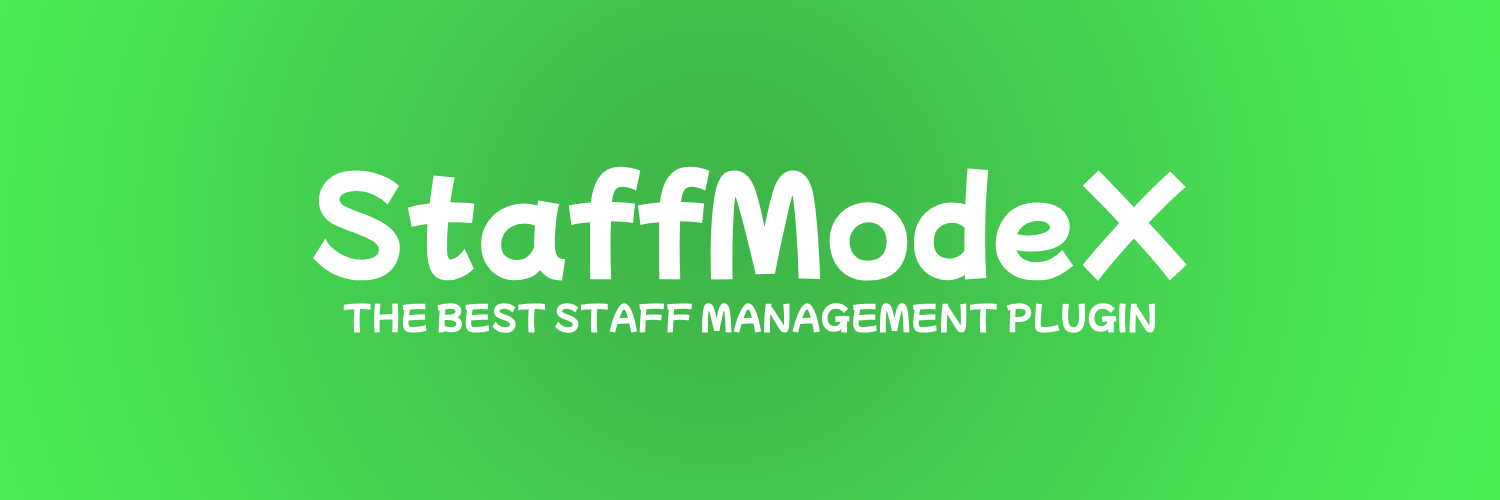
<style>
.page{position:relative;width:1500px;height:500px}
.page>*{position:absolute;margin:0}
.t1{font:33px "MochiyPopPOne-Regular";color:#ffffff}
.t2{font:123px "MochiyPopPOne-Regular";color:#ffffff}
</style>
<div class="page">
<p class="t1" style="left:313px;top:166px;width:874px;height:167px;text-align:center"><span class="t2">StaffModeX<br></span>THE BEST STAFF MANAGEMENT PLUGIN</p>
</div>
